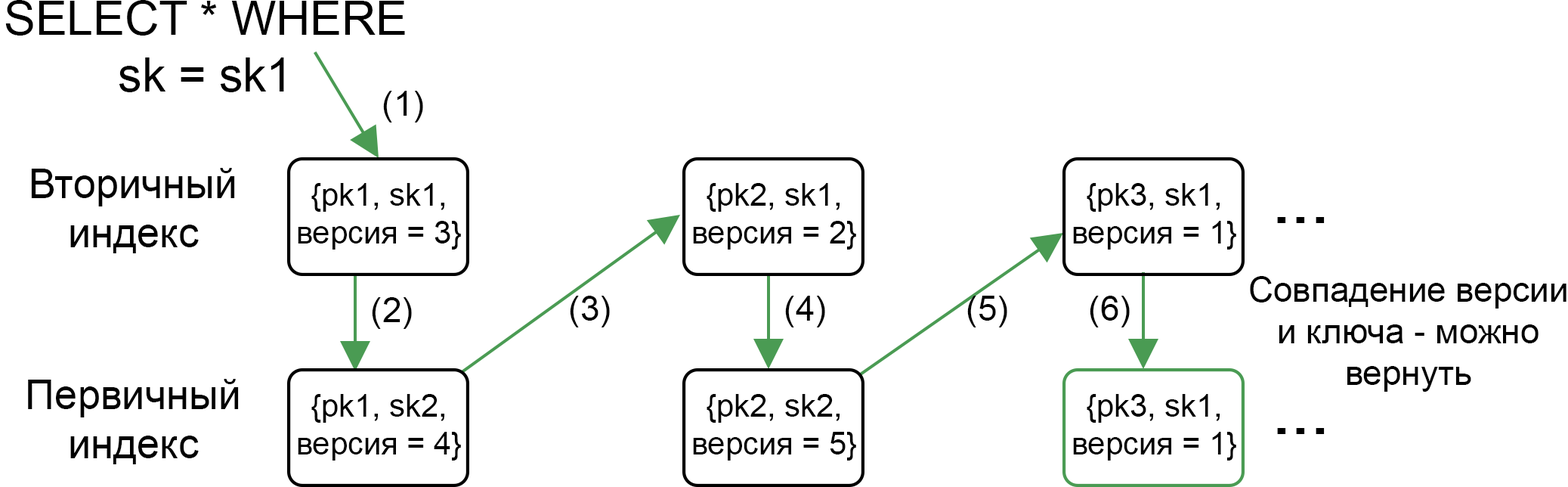
<style>
.page{position:relative;width:1568px;height:487px;background:#ffffff}
.page>*{position:absolute;margin:0}
.t1{font:47.2px "ArialMT";color:#000000}
.t2{font:34.6px "ArialMT";color:#000000}
.t3{font:40.9px "ArialMT";color:#000000}
.t4{font:31.5px "ArialMT";color:#000000}
.t5{font:63px "ArialMT";color:#000000;font-weight:bold}
</style>
<div class="page">
<p class="t1" style="left:5px;top:0px;width:400px;height:92px;text-align:center">SELECT * WHERE<br>sk = sk1</p>
<p class="t2" style="left:383px;top:91px;width:40px;height:31px">(1)</p>
<p class="t3" style="left:31px;top:168px;width:204px;height:85px;text-align:center">Вторичный<br>индекс</p>
<p class="t4" style="left:298px;top:183px;width:163px;height:66px;text-align:center">{pk1, sk1,<br>версия = 3}</p>
<p class="t4" style="left:693px;top:183px;width:163px;height:66px;text-align:center">{pk2, sk1,<br>версия = 2}</p>
<p class="t4" style="left:1073px;top:183px;width:163px;height:66px;text-align:center">{pk3, sk1,<br>версия = 1}</p>
<p class="t5" style="left:1277px;top:217px;width:48px;height:6px">...</p>
<p class="t2" style="left:1250px;top:276px;width:316px;height:115px;text-align:center">Совпадение версии<br>и ключа - можно<br>вернуть</p>
<p class="t2" style="left:372px;top:297px;width:40px;height:32px">(2)</p>
<p class="t2" style="left:570px;top:295px;width:40px;height:32px">(3)</p>
<p class="t2" style="left:785px;top:295px;width:40px;height:32px">(4)</p>
<p class="t2" style="left:967px;top:295px;width:40px;height:32px">(5)</p>
<p class="t2" style="left:1090px;top:295px;width:40px;height:32px">(6)</p>
<p class="t3" style="left:28px;top:379px;width:211px;height:85px;text-align:center">Первичный<br>индекс</p>
<p class="t4" style="left:298px;top:394px;width:163px;height:66px;text-align:center">{pk1, sk2,<br>версия = 4}</p>
<p class="t4" style="left:693px;top:394px;width:163px;height:66px;text-align:center">{pk2, sk2,<br>версия = 5}</p>
<p class="t4" style="left:1073px;top:394px;width:163px;height:66px;text-align:center">{pk3, sk1,<br>версия = 1}</p>
<p class="t5" style="left:1277px;top:428px;width:48px;height:6px">...</p>
</div>
